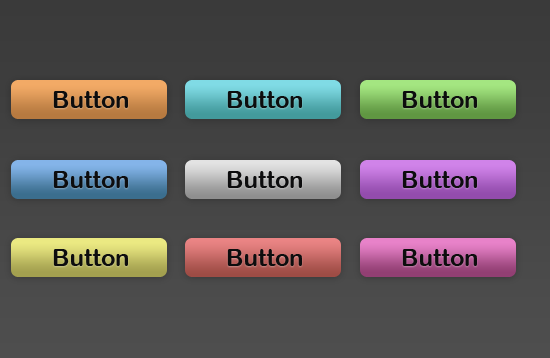
<style>
.page{position:relative;width:550px;height:358px}
.page>*{position:absolute;margin:0}
.t1{font:24px "ArialRoundedMTBold";color:#0d0d0e}
</style>
<div class="page">
<p class="t1" style="left:53px;top:91px;width:75px;height:17px">Button</p>
<p class="t1" style="left:227px;top:91px;width:75px;height:17px">Button</p>
<p class="t1" style="left:402px;top:91px;width:75px;height:17px">Button</p>
<p class="t1" style="left:53px;top:171px;width:75px;height:17px">Button</p>
<p class="t1" style="left:227px;top:171px;width:75px;height:17px">Button</p>
<p class="t1" style="left:402px;top:171px;width:75px;height:17px">Button</p>
<p class="t1" style="left:53px;top:249px;width:75px;height:17px">Button</p>
<p class="t1" style="left:227px;top:249px;width:75px;height:17px">Button</p>
<p class="t1" style="left:402px;top:249px;width:75px;height:17px">Button</p>
</div>
